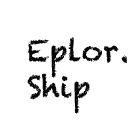
<style>
.page{position:relative;width:140px;height:140px;background:#ffffff}
.page>*{position:absolute;margin:0}
.t1{font:30px "Chalkduster";color:#050505}
</style>
<div class="page">
<p class="t1" style="left:27px;top:37px;width:100px;height:77px">Eplor.<br>Ship</p>
</div>
